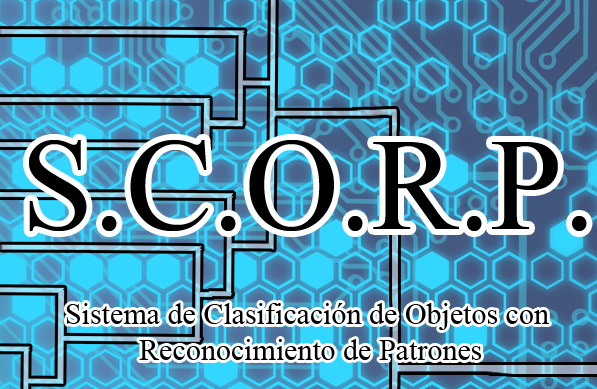
<style>
.page{position:relative;width:597px;height:389px}
.page>*{position:absolute;margin:0}
.t1{font:130px "TimesNewRomanPSMT";color:#000000}
.t2{font:30px "TimesNewRomanPSMT";color:#000000}
</style>
<div class="page">
<p class="t1" style="left:29px;top:140px;width:558px;height:91px">S.C.O.R.P.</p>
<p class="t2" style="left:66px;top:303px;width:483px;height:57px;text-align:center">Sistema de Clasificación de Objetos con<br> Reconocimiento de Patrones</p>
</div>
